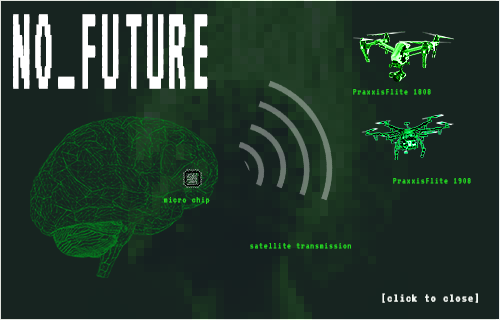
<style>
.page{position:relative;width:500px;height:320px;background:#172420}
.page>*{position:absolute;margin:0}
.t1{font:125px "VT323-Regular";letter-spacing:0.075em;color:#ffffff;font-weight:bold;scale:0.35 1}
.t2{font:9px "VT323-Regular";letter-spacing:0.075em;color:#24d921;font-weight:bold}
.t3{font:12px "VT323-Regular";letter-spacing:0.075em;color:#f6fbf6;font-weight:bold}
</style>
<div class="page">
<p class="t1" style="left:13px;top:14px;width:195px;height:75px">NO_FUTURE</p>
<p class="t2" style="left:353px;top:89px;width:78px;height:6px">PraxxisFlite 1808</p>
<p class="t2" style="left:393px;top:178px;width:78px;height:6px">PraxxisFlite 1908</p>
<p class="t2" style="left:164px;top:197px;width:46px;height:7px">micro chip</p>
<p class="t2" style="left:250px;top:243px;width:101px;height:6px">satellite transmission</p>
<p class="t3" style="left:382px;top:293px;width:96px;height:10px">[click to close]</p>
</div>
